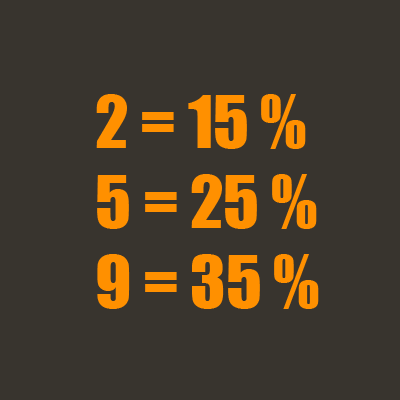
<style>
.page{position:relative;width:400px;height:400px;background:#38342e}
.page>*{position:absolute;margin:0}
.t1{font:66.7px "Impact";color:#ff9000}
</style>
<div class="page">
<p class="t1" style="left:96px;top:94px;width:223px;height:215px">2 = 15 %<br>5 = 25 %<br>9 = 35 %</p>
</div>
